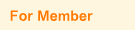
<style>
.page{position:relative;width:135px;height:30px;background:#fff6df}
.page>*{position:absolute;margin:0}
.t1{font:14px "DFLiHei-Md-HK-BF";letter-spacing:0.05em;color:#ff7800}
</style>
<div class="page">
<p class="t1" style="left:10px;top:10px;width:83px;height:11px">For Member</p>
</div>
